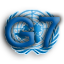
<style>
.page{position:relative;width:64px;height:64px;background:#ffffff}
.page>*{position:absolute;margin:0}
.t1{font:42px "ArialMT";text-transform:uppercase;font-weight:bold}
</style>
<div class="page">
<p class="t1" style="left:5px;top:17px;width:55px;height:31px">G7</p>
</div>
